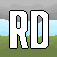
<style>
.page{position:relative;width:57px;height:57px;background:#ffffff}
.page>*{position:absolute;margin:0}
.t1{font:50px "BigNoodleTitling";letter-spacing:0.03em;color:#ffffff;font-weight:bold}
</style>
<div class="page">
<p class="t1" style="left:10px;top:11px;width:38px;height:37px">RD</p>
</div>
